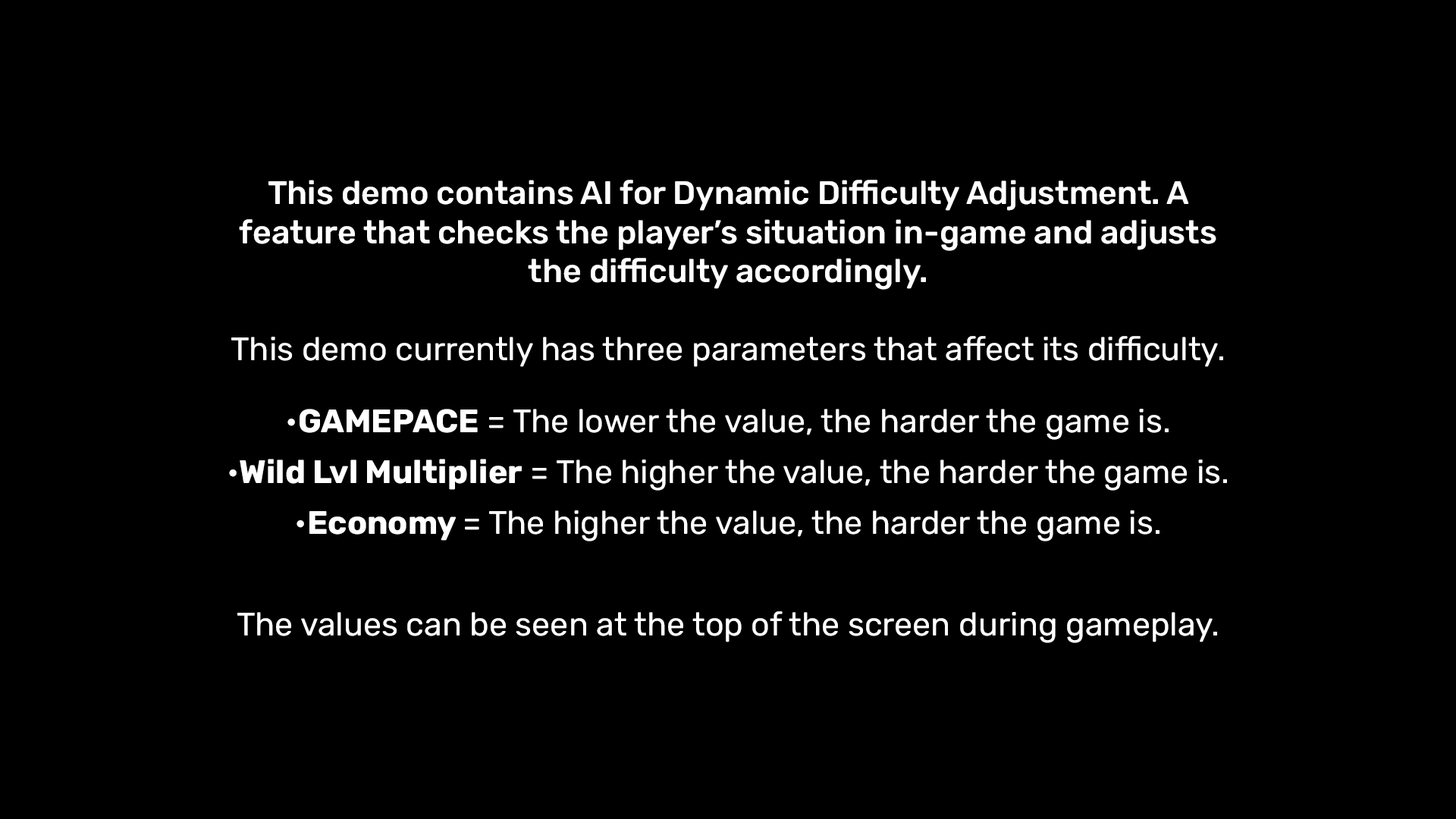
<style>
.page{position:relative;width:1456px;height:819px;background:#000000}
.page>*{position:absolute;margin:0}
.t1{font:32.6px "Rubik-Medium";color:#ffffff}
.t2{font:32.6px "Rubik-Regular";color:#ffffff}
.t3{font:32.6px "Rubik-Bold";color:#ffffff}
.t4{font:32.6px/72px "Rubik-Regular";color:#ffffff}
.t5{font:32.6px/58.4px "Rubik-Regular";color:#ffffff}
.t6{font:32.6px/50.8px "Rubik-Regular";color:#ffffff}
.t7{font:32.6px/50.8px "Rubik-Bold";color:#ffffff}
</style>
<div class="page">
<p class="t1" style="left:229px;top:180px;width:998px;height:463px;text-align:center">This demo contains AI for Dynamic Difficulty Adjustment. A feature that checks the player’s situation in-game and adjusts the difficulty accordingly.<br><br><span class="t2">This demo currently has three parameters that affect its difficulty.<br>•</span><span class="t3">GAMEPACE</span><span class="t2"> = The lower the va</span><span class="t4">l</span><span class="t2">ue, the harder the</span><span class="t5"> game is.<br></span><span class="t6">•</span><span class="t7">Wild Lvl Multiplier</span><span class="t6"> = The higher the value, the harder the game is.<br>•</span><span class="t7">Economy </span><span class="t6">= The higher the value, the harder the game is.<br><br>The values can be seen at the top of the screen during gameplay.</span></p>
</div>
